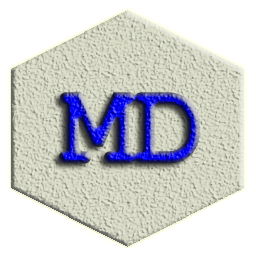
<style>
.page{position:relative;width:256px;height:256px;background:#ffffff}
.page>*{position:absolute;margin:0}
.t1{font:120px "CourierNewPS-BoldMT"}
</style>
<div class="page">
<p class="t1" style="left:58px;top:92px;width:142px;height:72px">MD</p>
</div>
